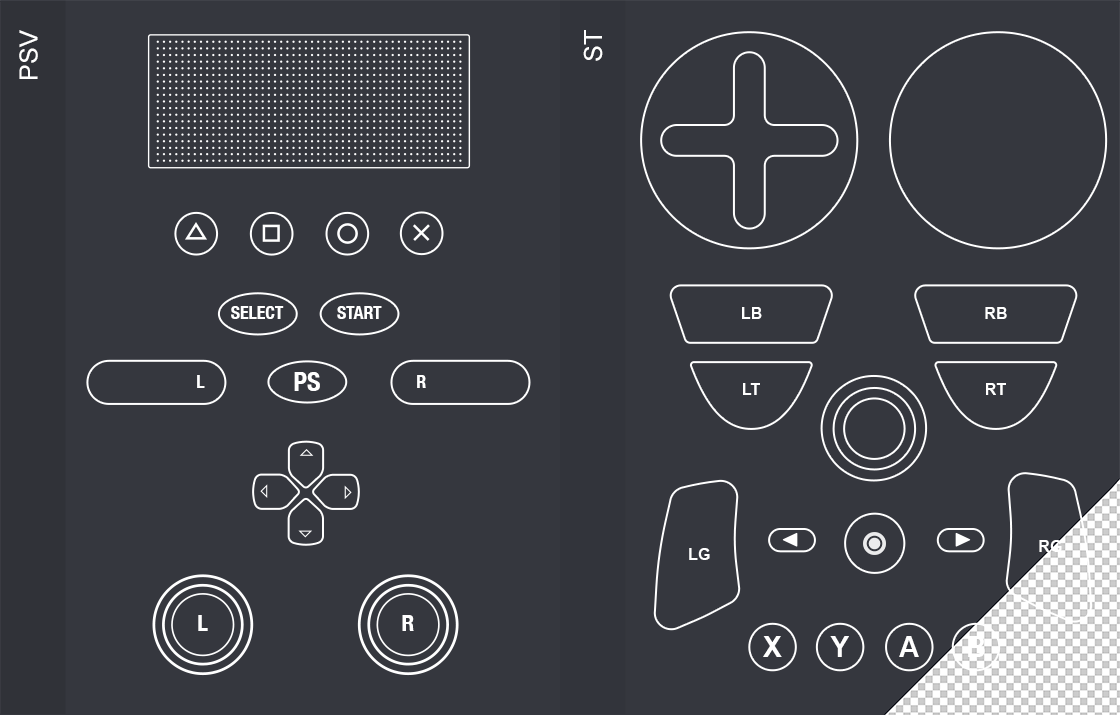
<style>
.page{position:relative;width:1120px;height:715px;background:#35373e}
.page>*{position:absolute;margin:0}
.t1{font:25px "ArialMT";color:#ffffff}
.t2{font:17.8px "HelveticaNeue-CondensedBold";color:#ffffff}
.t3{font:16.3px "Arial-BoldMT";color:#ffffff}
.t4{font:25.6px "HelveticaNeue-CondensedBold";color:#ffffff}
.t5{font:23px "HelveticaNeue-CondensedBold";color:#ffffff}
.t6{font:28.6px "Arial-BoldMT";color:#ffffff}
</style>
<div class="page">
<p class="t1" style="left:19px;top:30px;width:19px;height:49px;rotate:-90deg">PSV</p>
<p class="t1" style="left:583px;top:30px;width:20px;height:31px;rotate:-90deg">ST</p>
<p class="t2" style="left:231px;top:306px;width:53px;height:13px">SELECT</p>
<p class="t2" style="left:337px;top:306px;width:45px;height:13px">START</p>
<p class="t3" style="left:742px;top:307px;width:20px;height:12px">LB</p>
<p class="t3" style="left:985px;top:307px;width:22px;height:12px">RB</p>
<p class="t2" style="left:197px;top:375px;width:8px;height:13px">L</p>
<p class="t4" style="left:294px;top:372px;width:26px;height:19px">PS</p>
<p class="t2" style="left:417px;top:375px;width:9px;height:13px">R</p>
<p class="t3" style="left:743px;top:383px;width:17px;height:12px">LT</p>
<p class="t3" style="left:986px;top:383px;width:20px;height:12px">RT</p>
<p class="t3" style="left:1039px;top:540px;width:23px;height:12px">RG</p>
<p class="t3" style="left:689px;top:548px;width:21px;height:12px">LG</p>
<p class="t5" style="left:198px;top:615px;width:10px;height:16px">L</p>
<p class="t5" style="left:402px;top:615px;width:12px;height:16px">R</p>
<p class="t6" style="left:763px;top:636px;width:19px;height:21px">X</p>
<p class="t6" style="left:830px;top:636px;width:19px;height:21px">Y</p>
<p class="t6" style="left:899px;top:636px;width:20px;height:21px">A</p>
<p class="t6" style="left:968px;top:636px;width:17px;height:21px">B</p>
</div>
